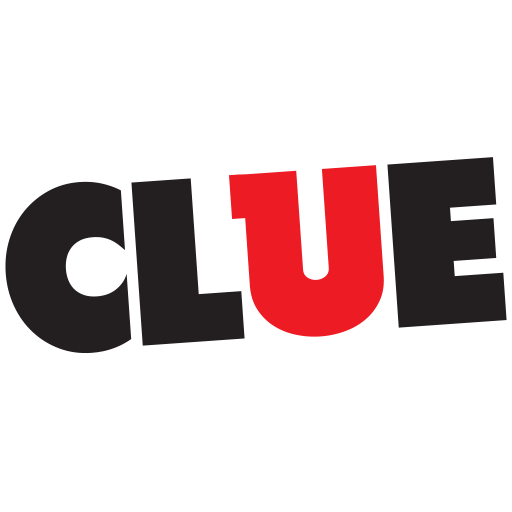
<style>
.page{position:relative;width:512px;height:512px;background:#ffffff}
.page>*{position:absolute;margin:0}
.t1{font:233.3px "Tondu-Beta";color:#231f20}
.t2{font:233.3px "Tondu-Beta";color:#ed1c24}
</style>
<div class="page">
<p class="t1" style="left:5px;top:157px;width:502px;height:197px;rotate:-4deg">CL<span class="t2">U</span>E</p>
</div>
